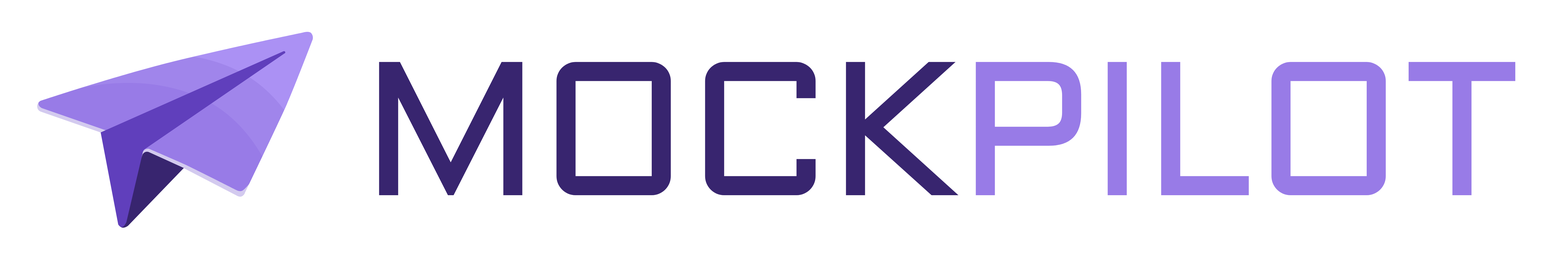
<style>
.page{position:relative;width:1568px;height:263px;background:#ffffff}
.page>*{position:absolute;margin:0}
.t1{font:190.5px "Aldrich-Regular"}
</style>
<div class="page">
<p class="t1" style="left:379px;top:62px;width:1136px;height:133px">MOCKPILOT</p>
</div>
